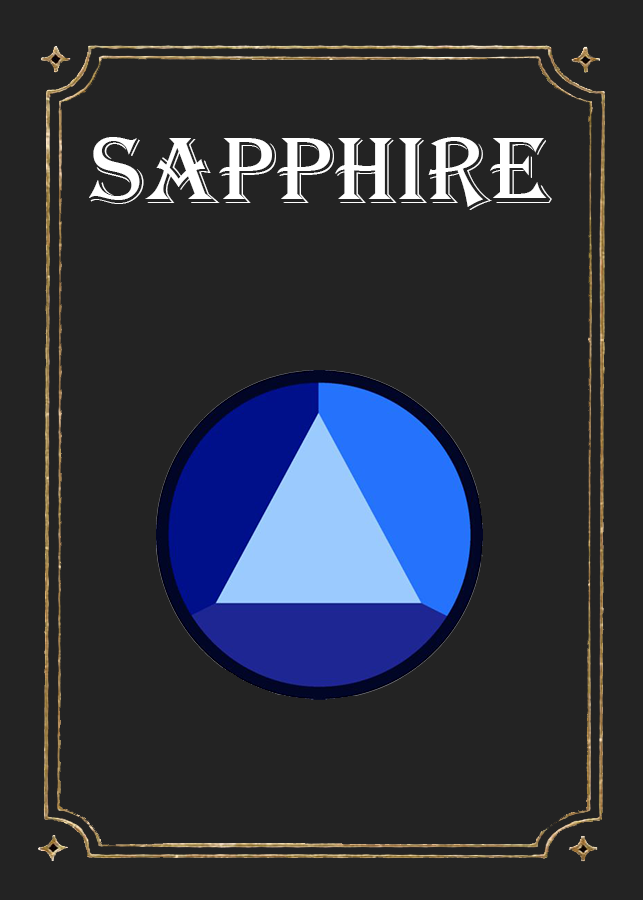
<style>
.page{position:relative;width:643px;height:900px;background:#232323}
.page>*{position:absolute;margin:0}
.t1{font:98.3px "Algerian";color:#ffffff}
</style>
<div class="page">
<p class="t1" style="left:89px;top:137px;width:463px;height:73px">Sapphire</p>
</div>
